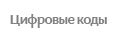
<style>
.page{position:relative;width:119px;height:40px;background:#ffffff}
.page>*{position:absolute;margin:0}
.t1{font:14px "M.Video-Bold";letter-spacing:-0.05em;color:#818181}
</style>
<div class="page">
<p class="t1" style="left:10px;top:14px;width:97px;height:14px">Цифровые коды</p>
</div>
